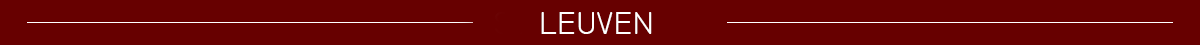
<style>
.page{position:relative;width:1200px;height:45px;background:#670000}
.page>*{position:absolute;margin:0}
.t1{font:32.1px "Technic";color:#ffffff}
</style>
<div class="page">
<p class="t1" style="left:541px;top:12px;width:111px;height:22px">LEUVEN</p>
</div>
